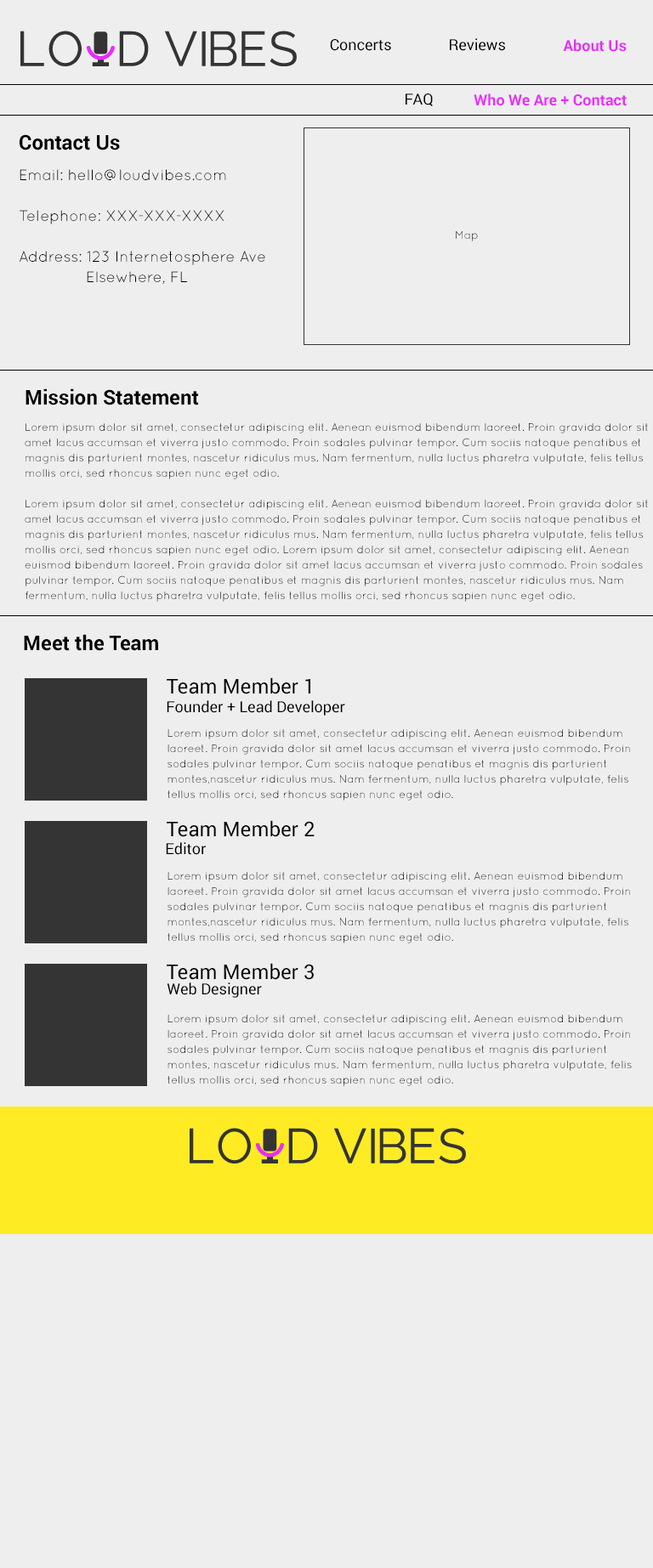
<style>
.page{position:relative;width:653px;height:1568px;background:#eeeeee}
.page>*{position:absolute;margin:0}
.t1{font:15.3px "Roboto-Regular";color:#000000}
.t2{font:15.3px "Roboto-Bold";color:#e92bff}
.t3{font:20.4px "Roboto-Bold";color:#000000}
.t4{font:15.3px/40.8px "Quicksand-Regular";color:#000000}
.t5{font:15.3px/20.4px "Quicksand-Regular";color:#000000}
.t6{font:11px "Quicksand-Regular"}
.t7{font:11px/15.3px "Quicksand-Regular";color:#000000}
.t8{font:20.4px "Roboto-Regular";color:#000000}
</style>
<div class="page">
<p class="t1" style="left:330px;top:39px;width:61px;height:12px">Concerts</p>
<p class="t1" style="left:450px;top:38px;width:55px;height:13px">Reviews</p>
<p class="t2" style="left:563px;top:39px;width:63px;height:13px">About Us</p>
<p class="t1" style="left:405px;top:93px;width:28px;height:13px">FAQ</p>
<p class="t2" style="left:473px;top:93px;width:153px;height:13px">Who We Are + Contact</p>
<p class="t3" style="left:20px;top:134px;width:100px;height:16px">Contact Us</p>
<p class="t4" style="left:20px;top:169px;width:245px;height:115px">Email: hello@loudvibes.com<br>Telephone: XXX-XXX-XXXX<br>Address: 123 Internetosphere Ave<br><span class="t5">         Elsewhere, FL</span></p>
<p class="t6" style="left:456px;top:231px;width:22px;height:10px">Map</p>
<p class="t3" style="left:25px;top:388px;width:174px;height:17px">Mission Statement</p>
<p class="t7" style="left:25px;top:423px;width:623px;height:179px">Lorem ipsum dolor sit amet, consectetur adipiscing elit. Aenean euismod bibendum laoreet. Proin gravida dolor sit <br>amet lacus accumsan et viverra justo commodo. Proin sodales pulvinar tempor. Cum sociis natoque penatibus et <br>magnis dis parturient montes, nascetur ridiculus mus. Nam fermentum, nulla luctus pharetra vulputate, felis tellus <br>mollis orci, sed rhoncus sapien nunc eget odio.<br><br>Lorem ipsum dolor sit amet, consectetur adipiscing elit. Aenean euismod bibendum laoreet. Proin gravida dolor sit <br>amet lacus accumsan et viverra justo commodo. Proin sodales pulvinar tempor. Cum sociis natoque penatibus et <br>magnis dis parturient montes, nascetur ridiculus mus. Nam fermentum, nulla luctus pharetra vulputate, felis tellus <br>mollis orci, sed rhoncus sapien nunc eget odio. Lorem ipsum dolor sit amet, consectetur adipiscing elit. Aenean <br>euismod bibendum laoreet. Proin gravida dolor sit amet lacus accumsan et viverra justo commodo. Proin sodales <br>pulvinar tempor. Cum sociis natoque penatibus et magnis dis parturient montes, nascetur ridiculus mus. Nam <br>fermentum, nulla luctus pharetra vulputate, felis tellus mollis orci, sed rhoncus sapien nunc eget odio.</p>
<p class="t3" style="left:24px;top:634px;width:134px;height:17px">Meet the Team</p>
<p class="t8" style="left:167px;top:677px;width:143px;height:17px">Team Member 1</p>
<p class="t1" style="left:167px;top:700px;width:178px;height:16px">Founder + Lead Developer</p>
<p class="t7" style="left:167px;top:729px;width:463px;height:72px">Lorem ipsum dolor sit amet, consectetur adipiscing elit. Aenean euismod bibendum <br>laoreet. Proin gravida dolor sit amet lacus accumsan et viverra justo commodo. Proin <br>sodales pulvinar tempor. Cum sociis natoque penatibus et magnis dis parturient <br>montes,nascetur ridiculus mus. Nam fermentum, nulla luctus pharetra vulputate, felis <br>tellus mollis orci, sed rhoncus sapien nunc eget odio.</p>
<p class="t8" style="left:167px;top:820px;width:147px;height:17px">Team Member 2</p>
<p class="t1" style="left:166px;top:842px;width:40px;height:13px">Editor</p>
<p class="t7" style="left:167px;top:872px;width:463px;height:71px">Lorem ipsum dolor sit amet, consectetur adipiscing elit. Aenean euismod bibendum <br>laoreet. Proin gravida dolor sit amet lacus accumsan et viverra justo commodo. Proin <br>sodales pulvinar tempor. Cum sociis natoque penatibus et magnis dis parturient <br>montes,nascetur ridiculus mus. Nam fermentum, nulla luctus pharetra vulputate, felis <br>tellus mollis orci, sed rhoncus sapien nunc eget odio.</p>
<p class="t8" style="left:167px;top:963px;width:147px;height:17px">Team Member 3</p>
<p class="t1" style="left:167px;top:982px;width:95px;height:16px">Web Designer</p>
<p class="t7" style="left:167px;top:1015px;width:464px;height:71px">Lorem ipsum dolor sit amet, consectetur adipiscing elit. Aenean euismod bibendum <br>laoreet. Proin gravida dolor sit amet lacus accumsan et viverra justo commodo. Proin <br>sodales pulvinar tempor. Cum sociis natoque penatibus et magnis dis parturient <br>montes, nascetur ridiculus mus. Nam fermentum, nulla luctus pharetra vulputate, felis <br>tellus mollis orci, sed rhoncus sapien nunc eget odio.</p>
</div>
